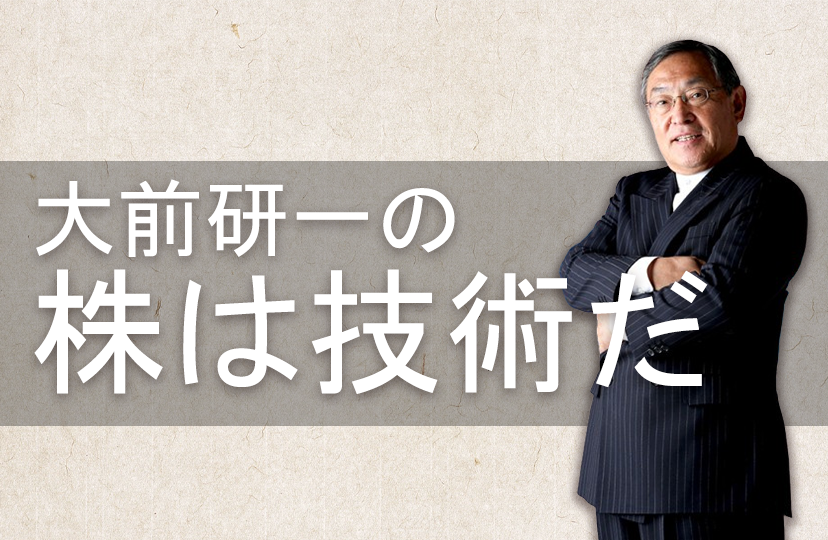
<style>
.page{position:relative;width:828px;height:540px}
.page>*{position:absolute;margin:0}
.t1{font:86.4px "Sankeikaishotai-Regular";color:#ffffff}
.t2{font:137px "Sankeikaishotai-Regular";color:#ffffff}
</style>
<div class="page">
<p class="t1" style="left:36px;top:179px;width:419px;height:78px">大前研一の</p>
<p class="t2" style="left:34px;top:269px;width:674px;height:125px">株は技術だ</p>
</div>
